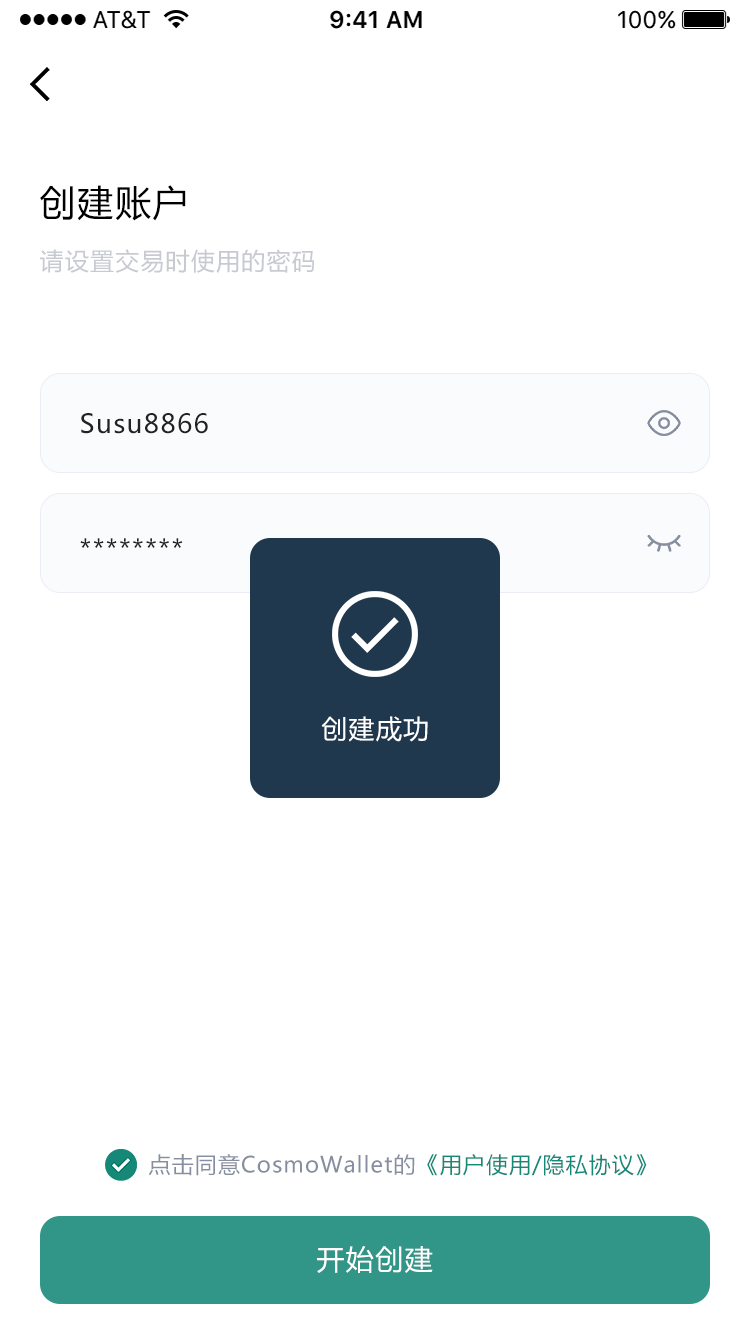
<style>
.page{position:relative;width:750px;height:1334px;background:#ffffff}
.page>*{position:absolute;margin:0}
.t1{font:36px "MicrosoftYaHei";letter-spacing:0.05em;color:#000000}
.t2{font:24px "MicrosoftYaHei";letter-spacing:0.05em;color:#c8cad2}
.t3{font:26px "MicrosoftYaHei";letter-spacing:0.05em;color:#222222}
.t4{font:26px "MicrosoftYaHei";letter-spacing:0.05em;color:#ffffff}
.t5{font:22px "MicrosoftYaHei";letter-spacing:0.05em;color:#878e9f}
.t6{font:22px "MicrosoftYaHei";letter-spacing:0.05em;color:#158878}
.t7{font:28px "MicrosoftYaHei";letter-spacing:0.05em;color:#ffffff}
</style>
<div class="page">
<p class="t1" style="left:40px;top:185px;width:146px;height:36px">创建账户</p>
<p class="t2" style="left:40px;top:249px;width:274px;height:24px">请设置交易时使用的密码</p>
<p class="t3" style="left:81px;top:413px;width:127px;height:21px">Susu8866</p>
<p class="t3" style="left:80px;top:538px;width:103px;height:10px">********</p>
<p class="t4" style="left:321px;top:716px;width:107px;height:26px">创建成功</p>
<p class="t5" style="left:148px;top:1154px;width:499px;height:22px">点击同意CosmoWallet的<span class="t6">《用户使用/隐私协议》</span></p>
<p class="t7" style="left:317px;top:1246px;width:116px;height:27px">开始创建</p>
</div>
